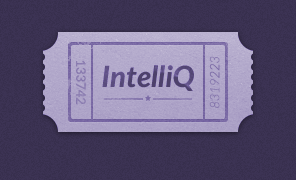
<style>
.page{position:relative;width:296px;height:180px}
.page>*{position:absolute;margin:0}
.t1{font:13px "Lato-Medium";color:#8a7cb0;text-transform:uppercase}
.t2{font:29.2px "Lato-HeavyItalic";color:#534674}
.t3{font:13px "Lato-LightItalic";color:#8879ae;text-transform:uppercase}
</style>
<div class="page">
<p class="t1" style="left:76px;top:60px;width:10px;height:45px;rotate:90deg">133742</p>
<p class="t2" style="left:102px;top:65px;width:92px;height:26px">IntelliQ</p>
<p class="t3" style="left:209px;top:56px;width:11px;height:52px;rotate:-90deg">8319223</p>
</div>
